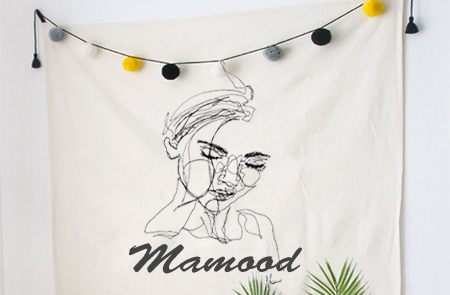
<style>
.page{position:relative;width:450px;height:295px}
.page>*{position:absolute;margin:0}
.t1{font:40.7px "BrushScriptStd";color:#444444;scale:1.17 1}
</style>
<div class="page">
<p class="t1" style="left:129px;top:243px;width:173px;height:31px">Mamood</p>
</div>
